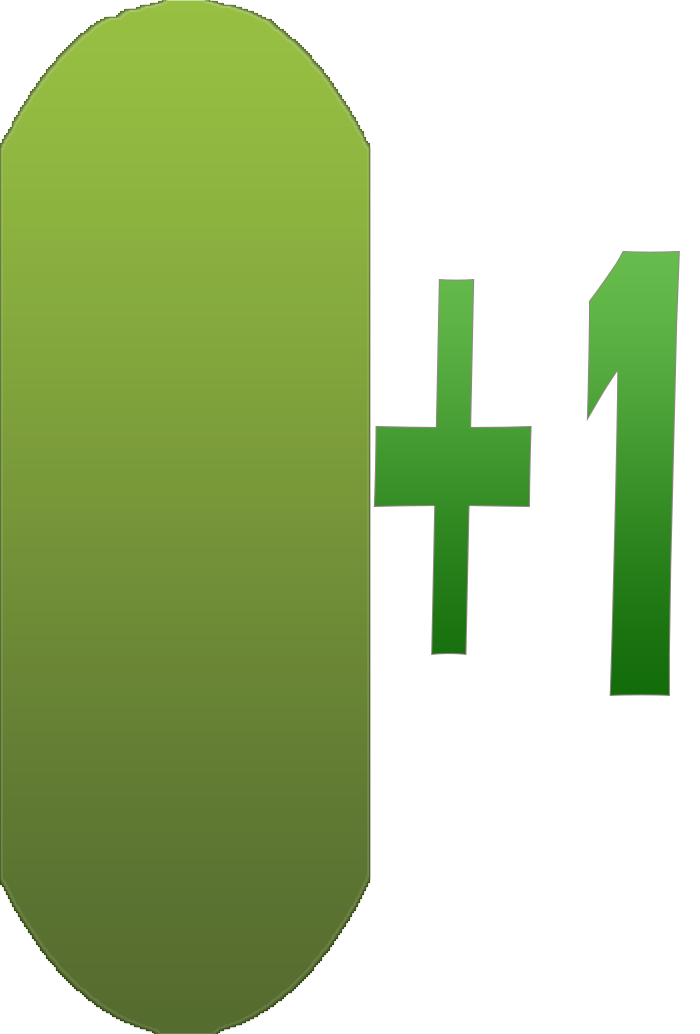
<style>
.page{position:relative;width:700px;height:1034px;background:#ffffff}
.page>*{position:absolute;margin:0}
.t1{font:666.7px "ErasITC-Bold";scale:0.42 1}
</style>
<div class="page">
<p class="t1" style="left:373px;top:251px;width:307px;height:445px">+1</p>
</div>
